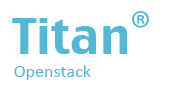
<style>
.page{position:relative;width:196px;height:88px;background:#ffffff}
.page>*{position:absolute;margin:0}
.t1{font:48px "CharcoalCY";color:#52b9d5}
.t2{font:18px "Calibri";color:#52b9d5}
</style>
<div class="page">
<p class="t1" style="left:12px;top:18px;width:116px;height:36px">Titan</p>
<p class="t2" style="left:14px;top:65px;width:77px;height:15px">Openstack</p>
</div>
